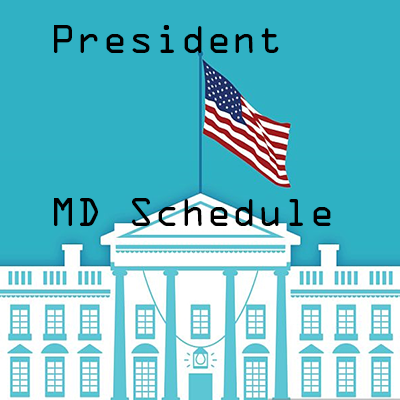
<style>
.page{position:relative;width:400px;height:400px;background:#30b1c4}
.page>*{position:absolute;margin:0}
.t1{font:36px "OCRAStd";color:#000000}
</style>
<div class="page">
<p class="t1" style="left:54px;top:25px;width:277px;height:201px">President<br><br><br> <br>MD Schedule</p>
</div>
